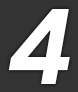
<style>
.page{position:relative;width:78px;height:92px;background:#333333}
.page>*{position:absolute;margin:0}
.t1{font:109.6px "ProductSans-BoldItalic";color:#ffffff}
</style>
<div class="page">
<p class="t1" style="left:8px;top:9px;width:62px;height:75px">4</p>
</div>
